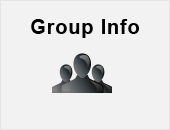
<style>
.page{position:relative;width:170px;height:130px;background:#f2f2f2}
.page>*{position:absolute;margin:0}
.t1{font:20px "Arial-BoldMT";letter-spacing:0.04em;color:#000000}
</style>
<div class="page">
<p class="t1" style="left:31px;top:19px;width:108px;height:19px">Group Info</p>
</div>
